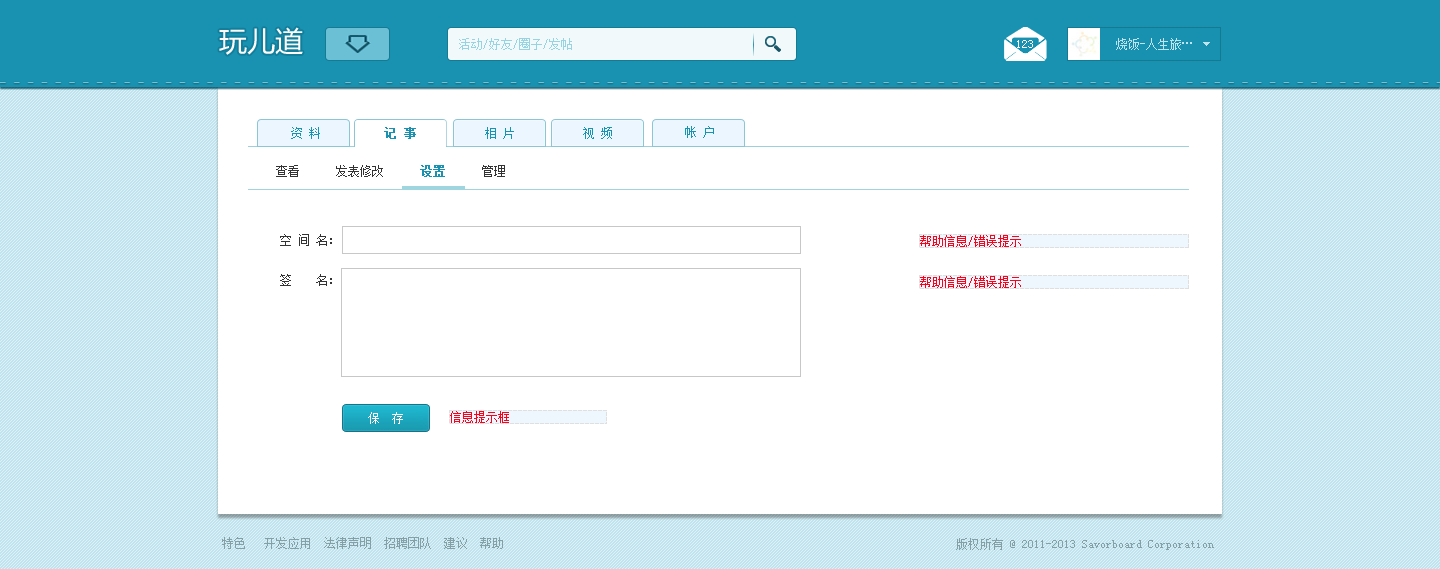
<style>
.page{position:relative;width:1440px;height:569px;background:#ffffff}
.page>*{position:absolute;margin:0}
.t1{font:28px "MicrosoftYaHei";color:#ffffff}
.t2{font:12px "SimSun";color:#98d3e4}
.t3{font:12px "SimSun";color:#ffffff}
.t4{font:12px "SimSun";color:#333333}
.t5{font:12px "SimSun";color:#1992b1;font-weight:bold}
.t6{font:12px/40px "SimSun";color:#333333}
.t7{font:12px "SimSun";color:#ff0019}
.t8{font:12px "SimSun";color:#849fa6}
</style>
<div class="page">
<p class="t1" style="left:219px;top:27px;width:84px;height:28px">玩儿道</p>
<p class="t2" style="left:459px;top:38px;width:113px;height:12px">活动/好友/圈子/发帖</p>
<p class="t3" style="left:1017px;top:40px;width:16px;height:8px">123</p>
<p class="t4" style="left:276px;top:165px;width:229px;height:12px">查看      发表修改      <span class="t5">设置</span>      管理</p>
<p class="t6" style="left:280px;top:234px;width:52px;height:52px">空 间 名：<br>签    名：</p>
<p class="t7" style="left:920px;top:276px;width:101px;height:12px">帮助信息/错误提示</p>
<p class="t8" style="left:222px;top:537px;width:281px;height:12px">特色   开发应用  法律声明  招聘团队  建议  帮助</p>
<p class="t8" style="left:956px;top:538px;width:258px;height:12px">版权所有 @ 2011-2013 Savorboard Corporation</p>
</div>
